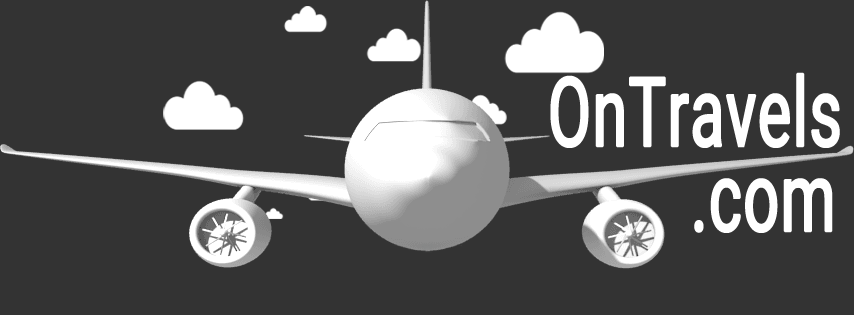
<style>
.page{position:relative;width:854px;height:315px;background:#333333}
.page>*{position:absolute;margin:0}
.t1{font:96px "Roboto-Regular";color:#ffffff;font-weight:bold;scale:0.65 1}
</style>
<div class="page">
<p class="t1" style="left:550px;top:72px;width:290px;height:76px">OnTravels</p>
<p class="t1" style="left:694px;top:178px;width:139px;height:55px">.com</p>
</div>
